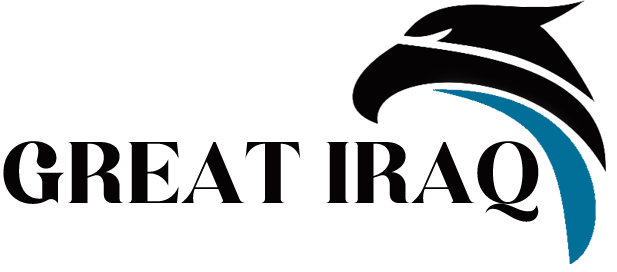
<style>
.page{position:relative;width:617px;height:272px;background:#ffffff}
.page>*{position:absolute;margin:0}
.t1{font:83.3px "Begika";color:#050304}
</style>
<div class="page">
<p class="t1" style="left:3px;top:141px;width:536px;height:81px">GREAT IRAQ</p>
</div>
